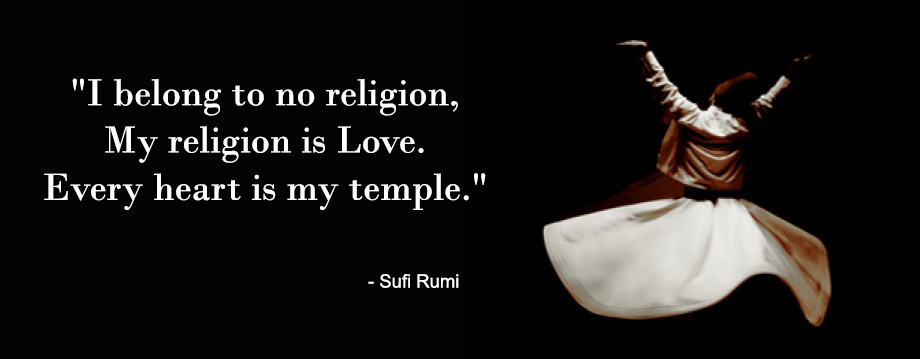
<style>
.page{position:relative;width:920px;height:359px;background:#000000}
.page>*{position:absolute;margin:0}
.t1{font:39.4px "BodoniMT";color:#ffffff}
.t2{font:18.5px "ArialMT";color:#ffffff}
</style>
<div class="page">
<p class="t1" style="left:44px;top:78px;width:442px;height:132px;text-align:center">"I belong to no religion,<br>My religion is Love.<br>Every heart is my temple."</p>
<p class="t2" style="left:368px;top:274px;width:91px;height:14px">- Sufi Rumi</p>
</div>
